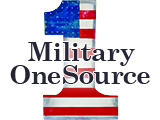
<style>
.page{position:relative;width:160px;height:120px;background:#ffffff}
.page>*{position:absolute;margin:0}
.t1{font:26.1px/23.2px "CenturySchoolbook-Bold";color:#242636}
.t2{font:26.1px/23.2px "CenturySchoolbook-Bold";letter-spacing:-0.04em;color:#242636}
</style>
<div class="page">
<p class="t1" style="left:10px;top:42px;width:140px;height:42px;text-align:center"><span class="t2">Military<br></span>OneSource</p>
</div>
